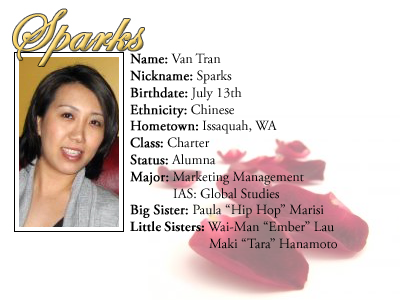
<style>
.page{position:relative;width:400px;height:300px;background:#ffffff}
.page>*{position:absolute;margin:0}
.t1{font:14px "AGaramondPro-Regular";color:#000000}
.t2{font:14px "AGaramondPro-Regular";color:#000000;font-weight:bold}
.t3{font:14px "AGaramondPro-Bold";color:#000000}
</style>
<div class="page">
<p class="t1" style="left:130px;top:53px;width:207px;height:196px"><span class="t2">Name:</span> Van Tran<br><span class="t2">Nickname:</span> Sparks<br><span class="t2">Birthdate:</span> July 13th<br><span class="t2">Ethnicity:</span> Chinese<br><span class="t2">Hometown:</span> Issaquah, WA<br><span class="t2">Class:</span> Charter<br><span class="t2">Status:</span> Alumna<br><span class="t2">Major:</span> Marketing Management<br>   IAS: Global Studies<br><span class="t2">Big Sister: </span>Paula “Hip Hop” Marisi<br><span class="t3">Little Sisters:</span> Wai-Man “Ember” Lau<br>    Maki “Tara” Hanamoto</p>
</div>
